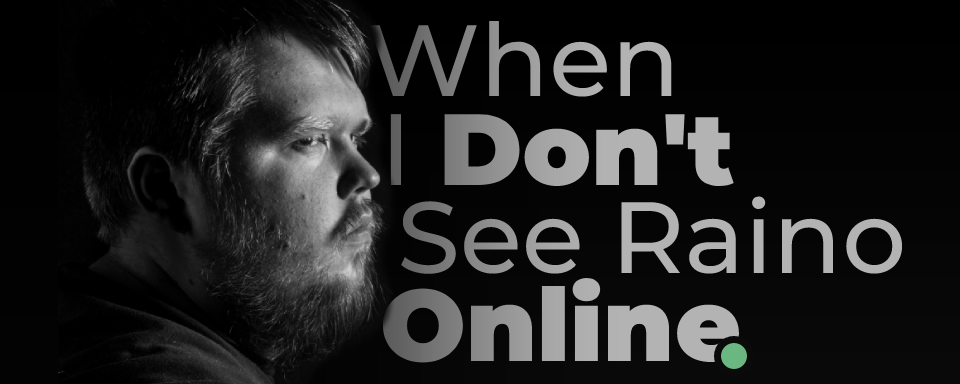
<style>
.page{position:relative;width:960px;height:384px}
.page>*{position:absolute;margin:0}
.t1{font:101.2px "Montserrat-Medium"}
.t2{font:101.2px "Montserrat-Black";color:#b3b3b3}
.t3{font:101.2px "Montserrat-Medium";color:#b3b3b3}
</style>
<div class="page">
<p class="t1" style="left:369px;top:20px;width:303px;height:77px">When</p>
<p class="t2" style="left:390px;top:114px;width:344px;height:73px"><span class="t3">I </span>Don't</p>
<p class="t3" style="left:401px;top:196px;width:502px;height:78px">See Raino</p>
<p class="t2" style="left:382px;top:277px;width:357px;height:86px">Online</p>
</div>
